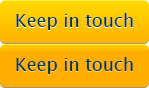
<style>
.page{position:relative;width:149px;height:88px;background:#ffae00}
.page>*{position:absolute;margin:0}
.t1{font:18px "LucidaSansUnicode";color:#01384d}
</style>
<div class="page">
<p class="t1" style="left:16px;top:13px;width:117px;height:17px">Keep in touch</p>
<p class="t1" style="left:16px;top:57px;width:117px;height:17px">Keep in touch</p>
</div>
